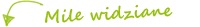
<style>
.page{position:relative;width:200px;height:27px;background:#ffffff}
.page>*{position:absolute;margin:0}
.t1{font:16.7px "SegoeScript-Bold";color:#97c00e;scale:0.97 1}
</style>
<div class="page">
<p class="t1" style="left:44px;top:5px;width:129px;height:18px;rotate:-3deg">Mile widziane</p>
</div>
